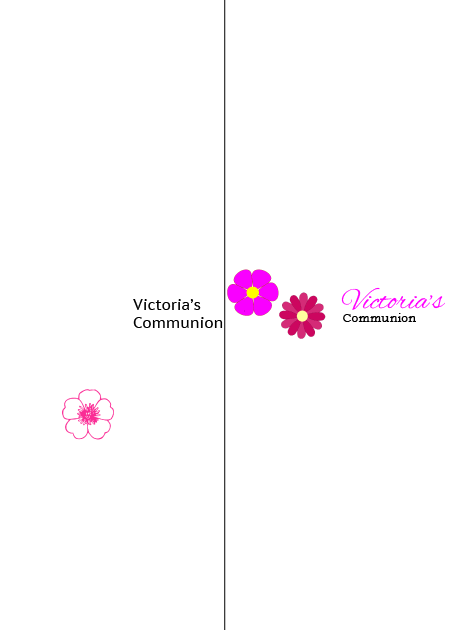
<style>
.page{position:relative;width:450px;height:630px;background:#ffffff}
.page>*{position:absolute;margin:0}
.t1{font:29px "AlexBrush-Regular";color:#ff00ff;scale:1.05 1}
.t2{font:11.6px "BookmanOldStyle";color:#000000;scale:1.05 1}
.t3{font:15px "PTSans-Caption";color:#000000}
</style>
<div class="page">
<p class="t1" style="left:341px;top:287px;width:104px;height:35px">Victoria’s<br><span class="t2">Communion</span></p>
<p class="t3" style="left:133px;top:299px;width:90px;height:29px">Victoria’s<br>Communion</p>
</div>
